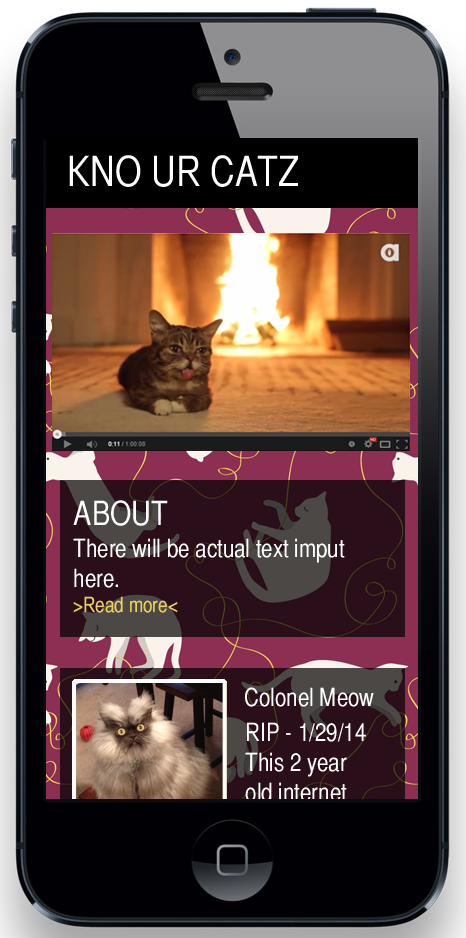
<style>
.page{position:relative;width:466px;height:938px}
.page>*{position:absolute;margin:0}
.t1{font:41.7px "HelveticaCYPlain";color:#ffffff;text-transform:uppercase}
.t2{font:33.3px "HelveticaCYPlain";color:#ffffff;text-transform:uppercase}
.t3{font:25px "HelveticaCYPlain";color:#ffffff}
.t4{font:20.8px "HelveticaCYPlain";color:#ebd05c}
</style>
<div class="page">
<p class="t1" style="left:69px;top:155px;width:229px;height:32px">KNO UR CATZ</p>
<p class="t2" style="left:73px;top:500px;width:95px;height:26px">About</p>
<p class="t3" style="left:73px;top:538px;width:272px;height:75px">There will be actual text imput here.<br><span class="t4">&gt;Read more&lt;</span></p>
<p class="t3" style="left:245px;top:687px;width:129px;height:20px">Colonel Meow</p>
<p class="t3" style="left:245px;top:722px;width:130px;height:110px">RIP - 1/29/14<br>This 2 year old internet sensation was</p>
</div>
